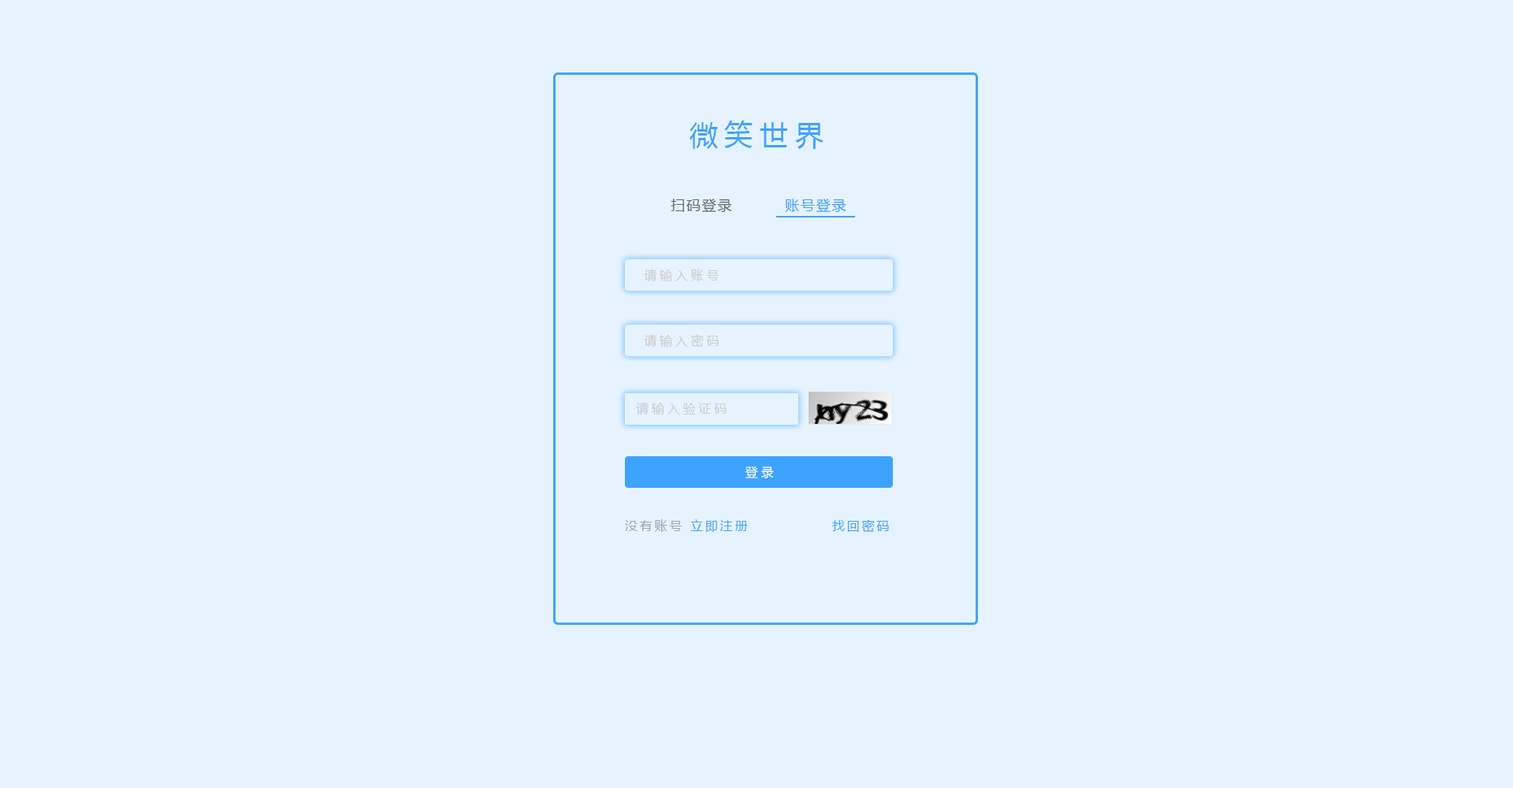
<style>
.page{position:relative;width:1513px;height:788px;background:#e6f3ff}
.page>*{position:absolute;margin:0}
.t1{font:28.4px "MicrosoftYaHei";letter-spacing:0.24em;color:#3ea2ff}
.t2{font:14.2px "MicrosoftYaHei";letter-spacing:0.1em;color:#666666}
.t3{font:14.2px "MicrosoftYaHei";letter-spacing:0.1em;color:#3ea2ff}
.t4{font:12.6px "MicrosoftYaHei";letter-spacing:0.24em;color:#cccccc}
.t5{font:12.6px "MicrosoftYaHei";letter-spacing:0.24em;color:#ffffff}
.t6{font:12.6px "MicrosoftYaHei";letter-spacing:0.18em;color:#9fa3b0}
.t7{font:12.6px "MicrosoftYaHei";letter-spacing:0.18em;color:#3ea2ff}
</style>
<div class="page">
<p class="t1" style="left:690px;top:121px;width:134px;height:28px">微笑世界</p>
<p class="t2" style="left:671px;top:199px;width:61px;height:14px">扫码登录</p>
<p class="t3" style="left:785px;top:199px;width:61px;height:14px">账号登录</p>
<p class="t4" style="left:644px;top:269px;width:76px;height:13px">请输入账号</p>
<p class="t4" style="left:644px;top:334px;width:75px;height:14px">请输入密码</p>
<p class="t4" style="left:636px;top:402px;width:91px;height:13px">请输入验证码</p>
<p class="t5" style="left:745px;top:466px;width:29px;height:12px">登录</p>
<p class="t6" style="left:625px;top:519px;width:123px;height:13px">没有账号 <span class="t7">立即注册</span></p>
<p class="t7" style="left:832px;top:519px;width:57px;height:13px">找回密码</p>
</div>
